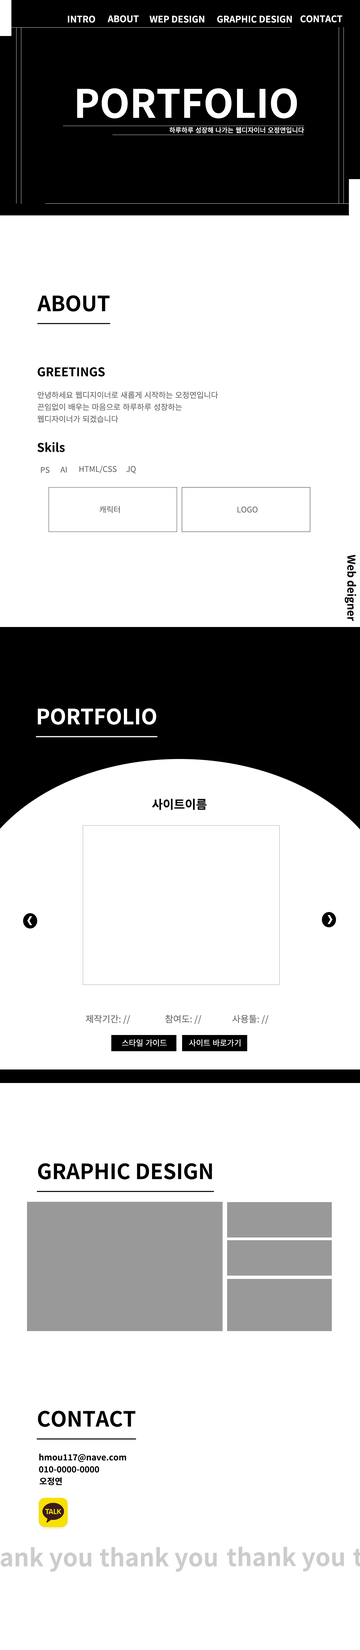
<style>
.page{position:relative;width:360px;height:1650px;background:#ffffff}
.page>*{position:absolute;margin:0}
.t1{font:9px "NotoSansKR-Bold";color:#fbfbfb}
.t2{font:39px "NotoSansKR-Bold";color:#ffffff}
.t3{font:6.6px "NotoSansKR-Medium";color:#ffffff}
.t4{font:21px "NotoSansKR-Bold";color:#000000;text-decoration:underline}
.t5{font:12px "NotoSansKR-Bold";color:#000000}
.t6{font:7.8px/12px "NotoSansKR-Regular";color:#666666}
.t7{font:7.8px "NotoSansKR-Regular";color:#666666}
.t8{font:10.8px "NotoSansKR-Bold";color:#000000}
.t9{font:21px "NotoSansKR-Bold";color:#ffffff;text-decoration:underline}
.t10{font:9px "NotoSansKR-Regular";color:#666666}
.t11{font:7.8px "NotoSansKR-Regular";color:#ffffff}
.t12{font:8.4px "NotoSansKR-Bold";color:#000000}
.t13{font:24px "NotoSansKR-Bold";color:#cccccc}
</style>
<div class="page">
<p class="t1" style="left:68px;top:16px;width:27px;height:7px">INTRO</p>
<p class="t1" style="left:107px;top:15px;width:32px;height:7px">ABOUT</p>
<p class="t1" style="left:149px;top:16px;width:55px;height:7px">WEP DESIGN</p>
<p class="t1" style="left:217px;top:16px;width:75px;height:7px">GRAPHIC DESIGN</p>
<p class="t1" style="left:300px;top:15px;width:42px;height:7px">CONTACT</p>
<p class="t2" style="left:77px;top:88px;width:220px;height:30px">PORTFOLIO</p>
<p class="t3" style="left:170px;top:127px;width:134px;height:6px">하루하루 성장해 나가는 웹디자이너 오정연입니다</p>
<p class="t4" style="left:37px;top:295px;width:73px;height:29px">ABOUT</p>
<p class="t5" style="left:38px;top:367px;width:67px;height:9px">GREETINGS</p>
<p class="t6" style="left:38px;top:391px;width:180px;height:32px">안녕하세요 웹디지이너로 새롭게 시작하는 오정연입니다<br>끈임없이 배우는 마음으로 하루하루 성장하는<br>웹디자이너가 되겠습니다</p>
<p class="t5" style="left:37px;top:442px;width:28px;height:10px">Skils</p>
<p class="t7" style="left:41px;top:467px;width:9px;height:6px">PS</p>
<p class="t7" style="left:60px;top:466px;width:7px;height:6px">AI</p>
<p class="t7" style="left:79px;top:466px;width:38px;height:7px">HTML/CSS</p>
<p class="t7" style="left:126px;top:466px;width:10px;height:7px">JQ</p>
<p class="t7" style="left:100px;top:506px;width:20px;height:7px">캐릭터</p>
<p class="t7" style="left:237px;top:506px;width:21px;height:7px">LOGO</p>
<p class="t8" style="left:345px;top:555px;width:11px;height:66px;rotate:90deg">Web deigner</p>
<p class="t9" style="left:36px;top:708px;width:122px;height:29px">PORTFOLIO</p>
<p class="t5" style="left:152px;top:799px;width:55px;height:11px">사이트이름</p>
<p class="t10" style="left:86px;top:1015px;width:44px;height:9px">제작기간: //</p>
<p class="t10" style="left:165px;top:1015px;width:36px;height:9px">참여도: //</p>
<p class="t10" style="left:232px;top:1015px;width:36px;height:9px">사용툴: //</p>
<p class="t11" style="left:122px;top:1039px;width:45px;height:8px">스타일 가이드</p>
<p class="t11" style="left:189px;top:1039px;width:52px;height:8px">사이트 바로가기</p>
<p class="t4" style="left:37px;top:1163px;width:177px;height:29px">GRAPHIC DESIGN</p>
<p class="t4" style="left:37px;top:1411px;width:99px;height:29px">CONTACT</p>
<p class="t12" style="left:39px;top:1454px;width:87px;height:8px">hmou117@nave.com</p>
<p class="t12" style="left:39px;top:1466px;width:60px;height:7px">010-0000-0000</p>
<p class="t12" style="left:40px;top:1477px;width:22px;height:8px">오정연</p>
<p class="t13" style="left:100px;top:1547px;width:117px;height:25px">thank you</p>
<p class="t13" style="left:227px;top:1547px;width:117px;height:24px">thank you</p>
</div>
